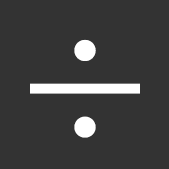
<style>
.page{position:relative;width:169px;height:169px;background:#333333}
.page>*{position:absolute;margin:0}
.t1{font:150px "KozGoPr6N-Regular";color:#ffffff;text-transform:uppercase}
</style>
<div class="page">
<p class="t1" style="left:30px;top:39px;width:110px;height:99px">÷</p>
</div>
